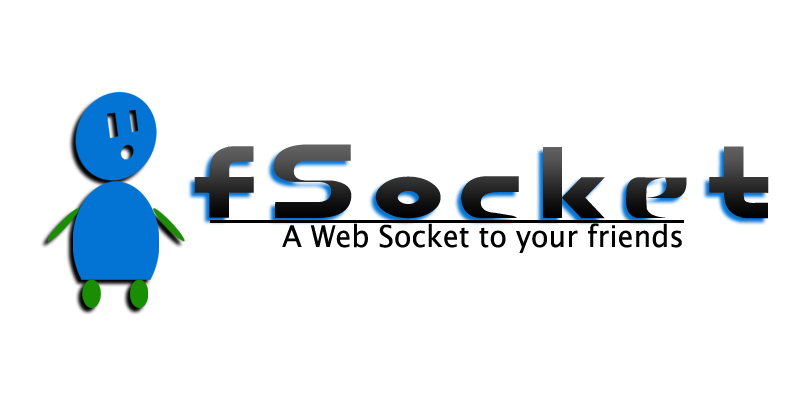
<style>
.page{position:relative;width:800px;height:400px;background:#ffffff}
.page>*{position:absolute;margin:0}
.t1{font:100px "AIRBORNE-GP";scale:0.95 1}
.t2{font:30px "LucidaSansUnicode";color:#000000;scale:0.95 1}
</style>
<div class="page">
<p class="t1" style="left:194px;top:144px;width:575px;height:75px">fSocket</p>
<p class="t2" style="left:282px;top:223px;width:400px;height:30px">A Web Socket to your friends</p>
</div>
